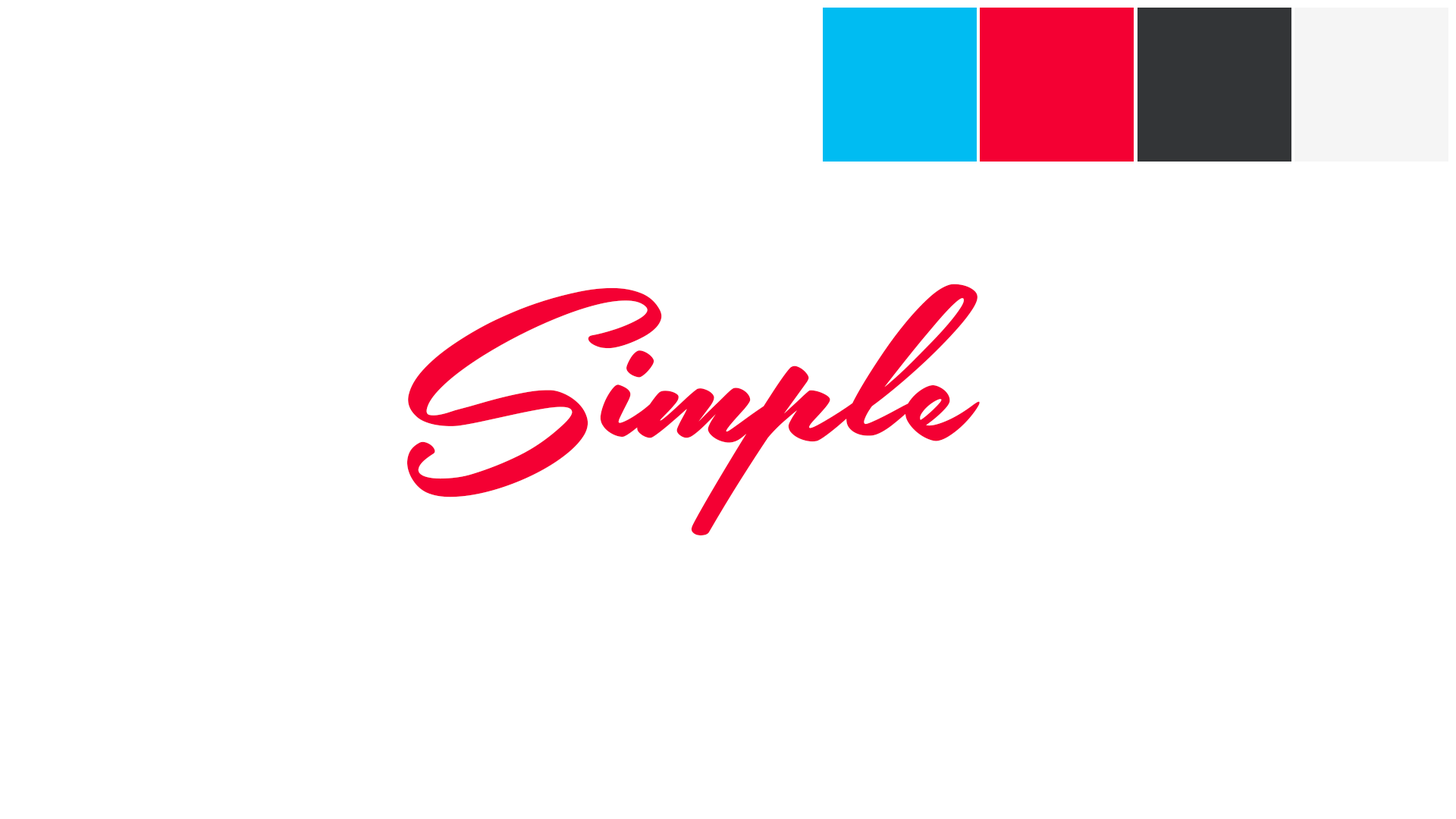
<style>
.page{position:relative;width:1456px;height:819px;background:#ffffff}
.page>*{position:absolute;margin:0}
.t1{font:275.5px "SouthernAirePersonalUseOnly";color:#f40033}
</style>
<div class="page">
<p class="t1" style="left:407px;top:284px;width:573px;height:251px">Simple</p>
</div>
